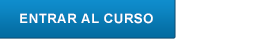
<style>
.page{position:relative;width:276px;height:42px;background:#ffffff}
.page>*{position:absolute;margin:0}
.t1{font:13px "Arial-BoldMT";letter-spacing:0.05em;color:#ffffff}
</style>
<div class="page">
<p class="t1" style="left:20px;top:13px;width:133px;height:11px">ENTRAR AL CURSO</p>
</div>
